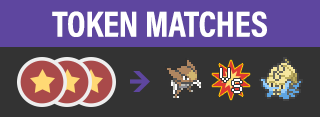
<style>
.page{position:relative;width:320px;height:117px;background:#333333}
.page>*{position:absolute;margin:0}
.t1{font:36.3px "AcuminProCond-Bold";color:#ffffff;text-transform:uppercase}
.t2{font:16px "PrintChar21";color:#ffffff}
</style>
<div class="page">
<p class="t1" style="left:52px;top:11px;width:215px;height:26px">Token Matches</p>
<p class="t2" style="left:220px;top:68px;width:10px;height:14px">V</p>
<p class="t2" style="left:232px;top:79px;width:10px;height:14px">S</p>
</div>
